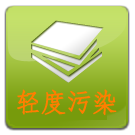
<style>
.page{position:relative;width:135px;height:135px}
.page>*{position:absolute;margin:0}
.t1{font:26px "STFangsong";letter-spacing:0.1em;color:#ff7e00;font-weight:bold}
</style>
<div class="page">
<p class="t1" style="left:17px;top:89px;width:100px;height:27px">轻度污染</p>
</div>
